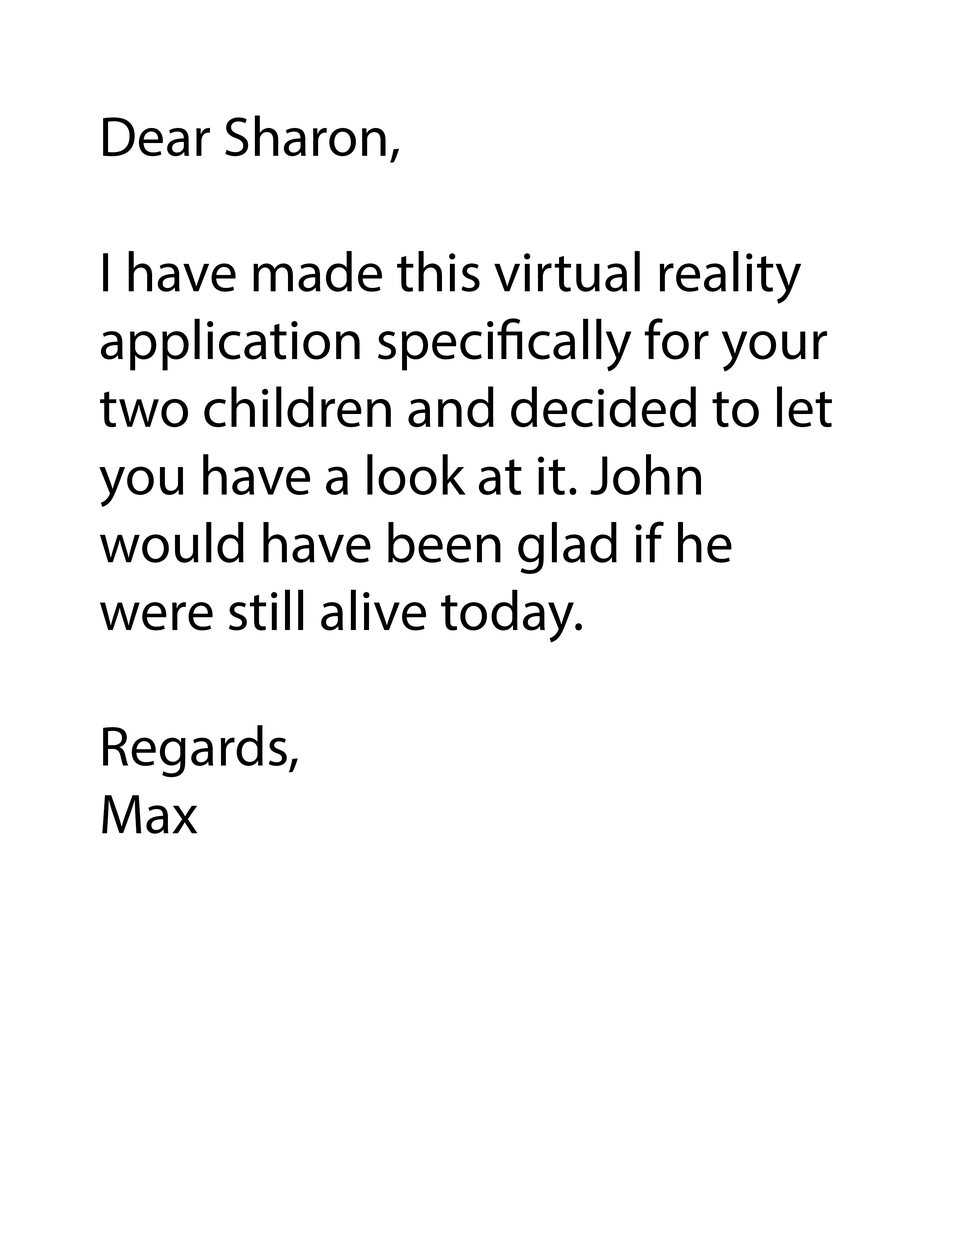
<style>
.page{position:relative;width:960px;height:1242px;background:#ffffff}
.page>*{position:absolute;margin:0}
.t1{font:56.5px "MyriadPro-Regular";color:#000000}
</style>
<div class="page">
<p class="t1" style="left:99px;top:116px;width:733px;height:718px">Dear Sharon,<br><br>I have made this virtual reality application specifically for your two children and decided to let you have a look at it. John would have been glad if he were still alive today.<br><br>Regards,<br>Max</p>
</div>
